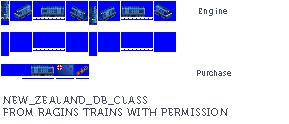
<style>
.page{position:relative;width:289px;height:124px;background:#ffffff}
.page>*{position:absolute;margin:0}
.t1{font:8px "Museo700-Regular";letter-spacing:0.075em;color:#444c5c}
.t2{font:8px "Museo700-Regular";color:#444c5c}
.t3{font:10px "Museo700-Regular";letter-spacing:0.075em;color:#444c5c;text-transform:uppercase}
</style>
<div class="page">
<p class="t1" style="left:199px;top:8px;width:28px;height:8px">Engine</p>
<p class="t2" style="left:197px;top:70px;width:34px;height:6px">Purchase</p>
<p class="t3" style="left:3px;top:96px;width:225px;height:20px">New_Zealand_DB_Class<br>from ragins trains with permission</p>
</div>
